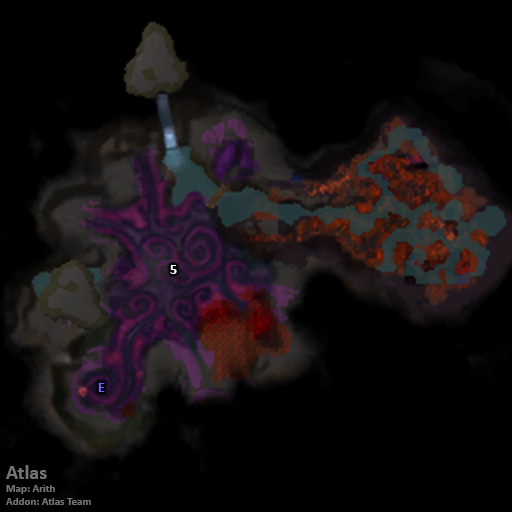
<style>
.page{position:relative;width:512px;height:512px;background:#000000}
.page>*{position:absolute;margin:0}
.t1{font:14px "Calibri-Bold";color:#ffffff}
.t2{font:14px "Calibri-Bold";color:#6666ff}
.t3{font:11px "Calibri-Bold";color:#747474}
.t4{font:20px "Calibri-Bold";color:#747474}
</style>
<div class="page">
<p class="t1" style="left:170px;top:265px;width:7px;height:9px">5</p>
<p class="t2" style="left:98px;top:383px;width:7px;height:9px">E</p>
<p class="t3" style="left:6px;top:465px;width:85px;height:40px"><span class="t4">Atlas<br></span>Map: Arith<br>Addon: Atlas Team</p>
</div>
